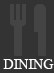
<style>
.page{position:relative;width:54px;height:73px;background:#333333}
.page>*{position:absolute;margin:0}
.t1{font:14px "TimesNewRomanPSMT";color:#ffffff}
</style>
<div class="page">
<p class="t1" style="left:3px;top:59px;width:51px;height:10px">DINING</p>
</div>
